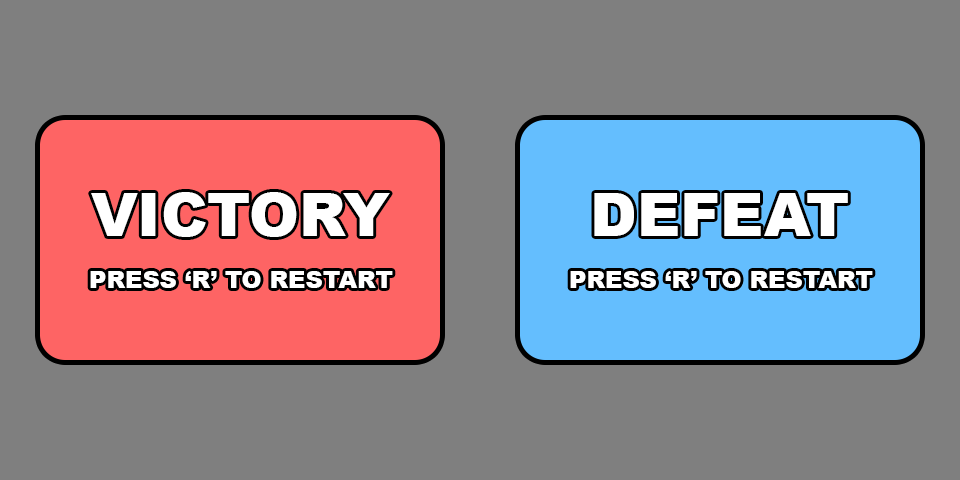
<style>
.page{position:relative;width:960px;height:480px;background:#7f7f7f}
.page>*{position:absolute;margin:0}
.t1{font:60px "Arial-Black";color:#ffffff}
.t2{font:24px "Arial-Black";color:#ffffff}
</style>
<div class="page">
<p class="t1" style="left:91px;top:192px;width:299px;height:45px">VICTORY</p>
<p class="t1" style="left:594px;top:193px;width:254px;height:43px">DEFEAT</p>
<p class="t2" style="left:90px;top:271px;width:303px;height:17px">PRESS ‘R’ TO RESTART</p>
<p class="t2" style="left:570px;top:271px;width:303px;height:17px">PRESS ‘R’ TO RESTART</p>
</div>
